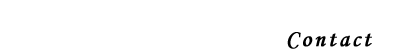
<style>
.page{position:relative;width:400px;height:55px;background:#ffffff}
.page>*{position:absolute;margin:0}
.t1{font:24px "MonotypeCorsiva";letter-spacing:0.1em;color:#000000;font-weight:bold}
</style>
<div class="page">
<p class="t1" style="left:287px;top:32px;width:85px;height:17px">Contact</p>
</div>
